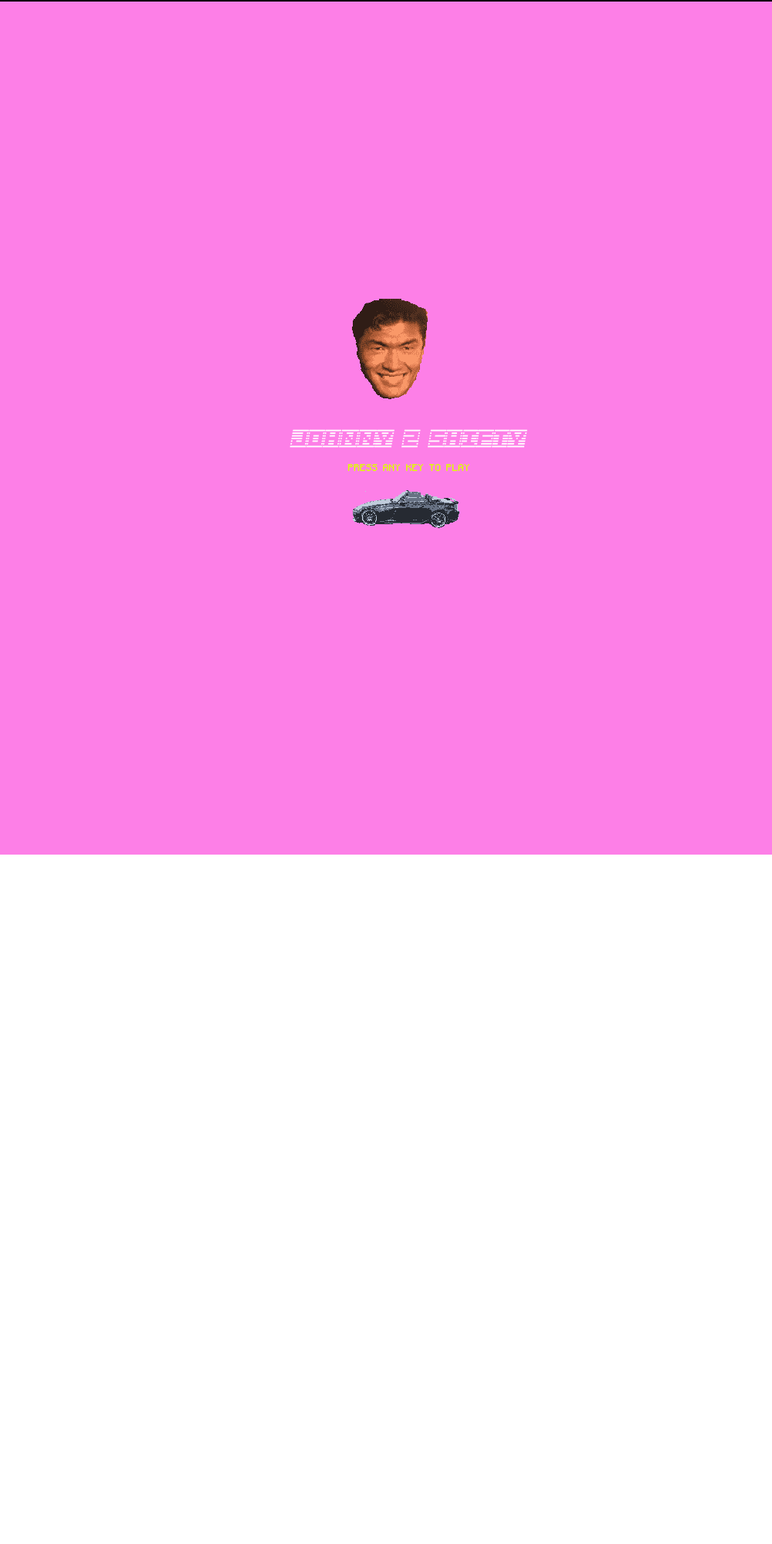
<style>
.page{position:relative;width:772px;height:1544px;background:#fd7fe7}
.page>*{position:absolute;margin:0}
.t1{font:18.5px "Border7alp";letter-spacing:0.025em;color:#ffffff;font-style:italic}
.t2{font:7.7px "Minecraftia";letter-spacing:0.025em;color:#deff00}
</style>
<div class="page">
<p class="t1" style="left:290px;top:429px;width:237px;height:19px">JOHNNY 2 SHIFTY</p>
<p class="t2" style="left:347px;top:464px;width:122px;height:8px">PRESS ANY KEY TO PLAY</p>
</div>
